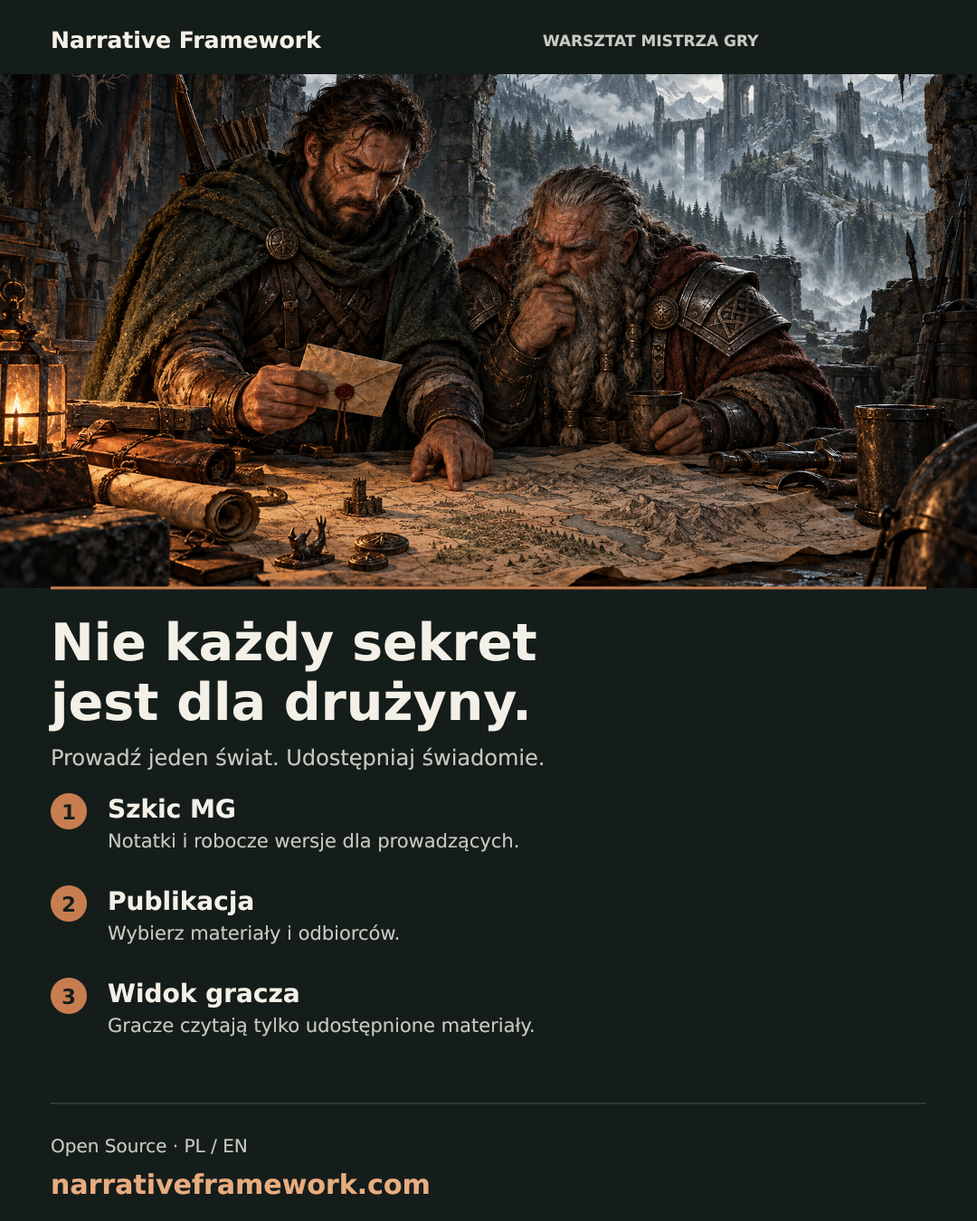
<style>
.page{position:relative;width:977px;height:1221px;background:#151d1b}
.page>*{position:absolute;margin:0}
.t1{font:22.6px "DejaVuSans-Bold";color:#f3f1e7}
.t2{font:15.4px "DejaVuSans-Bold";color:#c5cbbf}
.t3{font:51.5px "DejaVuSans-Bold";color:#f3f1e7}
.t4{font:21.7px "DejaVuSans-Regular";color:#c5cbbf}
.t5{font:25.3px "DejaVuSans-Bold";color:#f3f1e7}
.t6{font:20.8px "DejaVuSans-Bold";color:#151d1b}
.t7{font:19px "DejaVuSans-Regular";color:#c5cbbf}
.t8{font:18.1px "DejaVuSans-Regular";color:#c5cbbf}
.t9{font:27.1px "DejaVuSans-Bold";color:#e8ad7f}
</style>
<div class="page">
<p class="t1" style="left:52px;top:31px;width:271px;height:19px">Narrative Framework</p>
<p class="t2" style="left:542px;top:34px;width:218px;height:14px">WARSZTAT MISTRZA GRY</p>
<p class="t3" style="left:54px;top:620px;width:483px;height:53px">Nie każdy sekret</p>
<p class="t3" style="left:48px;top:680px;width:480px;height:53px">jest dla drużyny.</p>
<p class="t4" style="left:52px;top:747px;width:492px;height:24px">Prowadź jeden świat. Udostępniaj świadomie.</p>
<p class="t5" style="left:109px;top:798px;width:126px;height:21px">Szkic MG</p>
<p class="t6" style="left:63px;top:804px;width:12px;height:15px">1</p>
<p class="t7" style="left:109px;top:833px;width:410px;height:20px">Notatki i robocze wersje dla prowadzących.</p>
<p class="t5" style="left:109px;top:890px;width:145px;height:27px">Publikacja</p>
<p class="t6" style="left:61px;top:895px;width:14px;height:17px">2</p>
<p class="t7" style="left:107px;top:924px;width:293px;height:21px">Wybierz materiały i odbiorców.</p>
<p class="t6" style="left:61px;top:988px;width:15px;height:18px">3</p>
<p class="t5" style="left:107px;top:982px;width:192px;height:27px">Widok gracza</p>
<p class="t7" style="left:108px;top:1017px;width:426px;height:20px">Gracze czytają tylko udostępnione materiały.</p>
<p class="t8" style="left:51px;top:1139px;width:196px;height:19px">Open Source · PL / EN</p>
<p class="t9" style="left:52px;top:1173px;width:378px;height:23px">narrativeframework.com</p>
</div>
